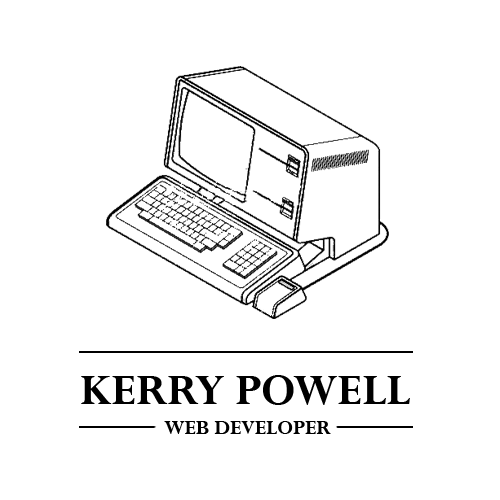
<style>
.page{position:relative;width:500px;height:500px;background:#ffffff}
.page>*{position:absolute;margin:0}
.t1{font:48px "Perpetua-Bold";color:#000000}
.t2{font:22px "Perpetua-Bold";color:#000000}
</style>
<div class="page">
<p class="t1" style="left:81px;top:375px;width:329px;height:30px">KERRY POWELL</p>
<p class="t2" style="left:164px;top:421px;width:167px;height:13px">WEB DEVELOPER</p>
</div>
